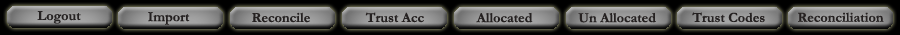
<style>
.page{position:relative;width:900px;height:35px}
.page>*{position:absolute;margin:0}
.t1{font:14px "Garamond-Bold";color:#252121}
</style>
<div class="page">
<p class="t1" style="left:37px;top:11px;width:44px;height:13px">Logout</p>
<p class="t1" style="left:148px;top:12px;width:42px;height:13px">Import</p>
<p class="t1" style="left:252px;top:12px;width:58px;height:11px">Reconcile</p>
<p class="t1" style="left:365px;top:12px;width:59px;height:11px">Trust Acc</p>
<p class="t1" style="left:476px;top:12px;width:57px;height:11px">Allocated</p>
<p class="t1" style="left:578px;top:12px;width:78px;height:11px">Un Allocated</p>
<p class="t1" style="left:692px;top:12px;width:73px;height:11px">Trust Codes</p>
<p class="t1" style="left:798px;top:12px;width:86px;height:10px">Reconciliation</p>
</div>
